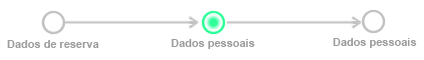
<style>
.page{position:relative;width:424px;height:60px;background:#ffffff}
.page>*{position:absolute;margin:0}
.t1{font:11px "Arial-BoldMT";color:#9c9c9c}
</style>
<div class="page">
<p class="t1" style="left:7px;top:40px;width:92px;height:8px">Dados de reserva</p>
<p class="t1" style="left:171px;top:39px;width:84px;height:10px">Dados pessoais</p>
<p class="t1" style="left:333px;top:38px;width:84px;height:10px">Dados pessoais</p>
</div>
